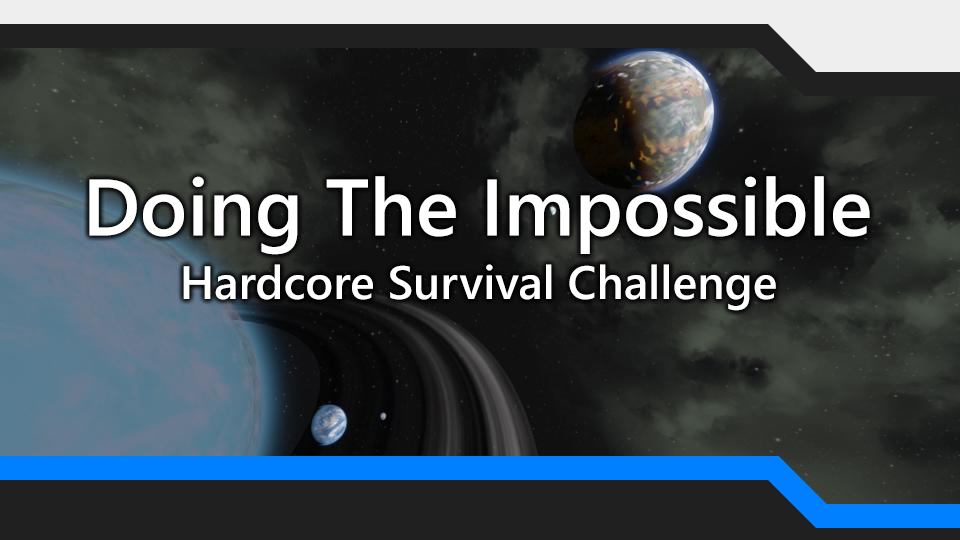
<style>
.page{position:relative;width:960px;height:540px}
.page>*{position:absolute;margin:0}
.t1{font:80px "SegoeUI-Semibold";color:#ffffff}
.t2{font:46.7px "SegoeUI-Semibold";color:#ffffff}
</style>
<div class="page">
<p class="t1" style="left:89px;top:176px;width:781px;height:79px">Doing The Impossible</p>
<p class="t2" style="left:183px;top:264px;width:593px;height:47px">Hardcore Survival Challenge</p>
</div>
